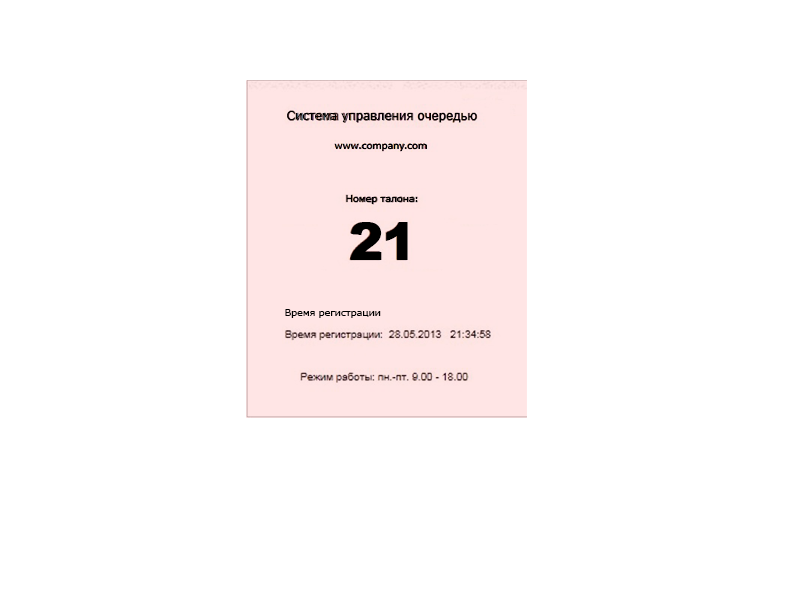
<style>
.page{position:relative;width:800px;height:600px;background:#ffffff}
.page>*{position:absolute;margin:0}
.t1{font:12px "Verdana";letter-spacing:-0.01em;color:#000000}
.t2{font:10px "Verdana";letter-spacing:-0.026em;color:#000000}
.t3{font:52px "Arial-Black";letter-spacing:-0.026em;color:#000000}
</style>
<div class="page">
<p class="t1" style="left:287px;top:111px;width:190px;height:11px">Система управления очередью</p>
<p class="t2" style="left:334px;top:144px;width:93px;height:7px">www.company.com</p>
<p class="t2" style="left:346px;top:195px;width:72px;height:9px">Номер талона:</p>
<p class="t3" style="left:350px;top:222px;width:58px;height:38px">21</p>
<p class="t2" style="left:285px;top:309px;width:96px;height:9px">Время регистрации</p>
</div>
